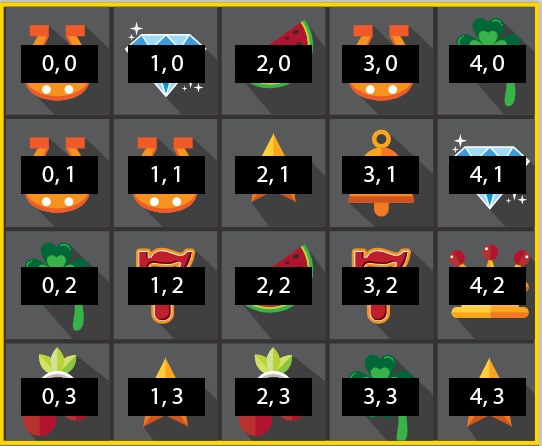
<style>
.page{position:relative;width:542px;height:446px;background:#58595b}
.page>*{position:absolute;margin:0}
.t1{font:24px "MyriadPro-Regular";color:#ffffff}
</style>
<div class="page">
<p class="t1" style="left:42px;top:55px;width:34px;height:19px">0, 0</p>
<p class="t1" style="left:151px;top:55px;width:32px;height:19px">1, 0</p>
<p class="t1" style="left:257px;top:55px;width:33px;height:19px">2, 0</p>
<p class="t1" style="left:364px;top:55px;width:33px;height:19px">3, 0</p>
<p class="t1" style="left:470px;top:55px;width:34px;height:19px">4, 0</p>
<p class="t1" style="left:42px;top:166px;width:31px;height:19px">0, 1</p>
<p class="t1" style="left:151px;top:166px;width:29px;height:19px">1, 1</p>
<p class="t1" style="left:257px;top:166px;width:30px;height:19px">2, 1</p>
<p class="t1" style="left:364px;top:166px;width:30px;height:19px">3, 1</p>
<p class="t1" style="left:470px;top:166px;width:31px;height:19px">4, 1</p>
<p class="t1" style="left:42px;top:277px;width:34px;height:19px">0, 2</p>
<p class="t1" style="left:151px;top:277px;width:32px;height:19px">1, 2</p>
<p class="t1" style="left:257px;top:277px;width:33px;height:19px">2, 2</p>
<p class="t1" style="left:364px;top:277px;width:33px;height:19px">3, 2</p>
<p class="t1" style="left:470px;top:277px;width:34px;height:19px">4, 2</p>
<p class="t1" style="left:42px;top:388px;width:34px;height:19px">0, 3</p>
<p class="t1" style="left:151px;top:388px;width:32px;height:19px">1, 3</p>
<p class="t1" style="left:257px;top:388px;width:33px;height:19px">2, 3</p>
<p class="t1" style="left:364px;top:388px;width:33px;height:19px">3, 3</p>
<p class="t1" style="left:470px;top:388px;width:34px;height:19px">4, 3</p>
</div>
